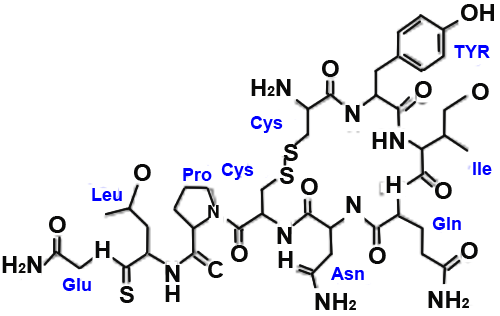
<style>
.page{position:relative;width:500px;height:316px;background:#ffffff}
.page>*{position:absolute;margin:0}
.t1{font:24px "Arial-BoldMT";color:#0a0a09}
.t2{font:18px "Arial-BoldMT";color:#0000ff}
.t3{font:14px "Arial-BoldMT";color:#0a0a09}
.t4{font:18px "Arial-BoldMT";color:#0a0a09}
</style>
<div class="page">
<p class="t1" style="left:461px;top:4px;width:33px;height:17px">OH</p>
<p class="t2" style="left:454px;top:45px;width:36px;height:13px">TYR</p>
<p class="t1" style="left:322px;top:60px;width:17px;height:17px">O</p>
<p class="t1" style="left:251px;top:79px;width:40px;height:17px">H<span class="t3">2</span>N</p>
<p class="t1" style="left:415px;top:81px;width:17px;height:17px">O</p>
<p class="t1" style="left:472px;top:83px;width:17px;height:17px">O</p>
<p class="t1" style="left:345px;top:105px;width:15px;height:17px">N</p>
<p class="t2" style="left:250px;top:116px;width:33px;height:17px">Cys</p>
<p class="t1" style="left:372px;top:132px;width:32px;height:17px">HN</p>
<p class="t1" style="left:283px;top:144px;width:15px;height:17px">S</p>
<p class="t1" style="left:134px;top:164px;width:17px;height:17px">O</p>
<p class="t2" style="left:183px;top:168px;width:29px;height:13px">Pro</p>
<p class="t2" style="left:221px;top:163px;width:33px;height:17px">Cys</p>
<p class="t1" style="left:279px;top:167px;width:15px;height:17px">S</p>
<p class="t2" style="left:473px;top:162px;width:19px;height:13px">lle</p>
<p class="t1" style="left:386px;top:176px;width:15px;height:17px">H</p>
<p class="t1" style="left:435px;top:182px;width:17px;height:17px">O</p>
<p class="t2" style="left:92px;top:188px;width:30px;height:13px">Leu</p>
<p class="t1" style="left:346px;top:196px;width:15px;height:17px">N</p>
<p class="t4" style="left:208px;top:205px;width:11px;height:13px">N</p>
<p class="t1" style="left:49px;top:216px;width:17px;height:17px">O</p>
<p class="t2" style="left:432px;top:217px;width:29px;height:13px">Gln</p>
<p class="t1" style="left:277px;top:227px;width:15px;height:17px">N</p>
<p class="t1" style="left:95px;top:241px;width:15px;height:17px">H</p>
<p class="t1" style="left:231px;top:245px;width:17px;height:17px">O</p>
<p class="t1" style="left:461px;top:242px;width:17px;height:17px">O</p>
<p class="t1" style="left:2px;top:256px;width:40px;height:17px">H<span class="t3">2</span>N</p>
<p class="t1" style="left:165px;top:265px;width:15px;height:17px">N</p>
<p class="t2" style="left:331px;top:267px;width:33px;height:13px">Asn</p>
<p class="t2" style="left:62px;top:278px;width:29px;height:13px">Glu</p>
<p class="t1" style="left:165px;top:285px;width:15px;height:17px">H</p>
<p class="t1" style="left:315px;top:293px;width:41px;height:17px">NH<span class="t3">2</span></p>
<p class="t1" style="left:428px;top:291px;width:41px;height:17px">NH<span class="t3">2</span></p>
</div>
